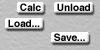
<style>
.page{position:relative;width:100px;height:50px}
.page>*{position:absolute;margin:0}
.t1{font:10px "Helvetica-Bold";color:#000000}
</style>
<div class="page">
<p class="t1" style="left:20px;top:3px;width:21px;height:8px">Calc</p>
<p class="t1" style="left:57px;top:3px;width:33px;height:8px">Unload</p>
<p class="t1" style="left:8px;top:19px;width:32px;height:8px">Load...</p>
<p class="t1" style="left:54px;top:33px;width:31px;height:8px">Save...</p>
</div>
